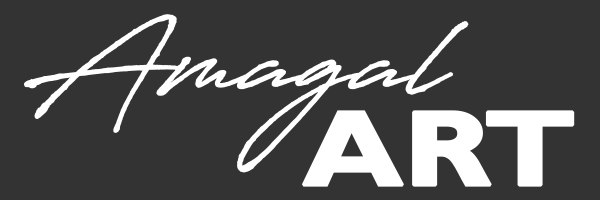
<style>
.page{position:relative;width:600px;height:200px;background:#333333}
.page>*{position:absolute;margin:0}
.t1{font:106.9px "AntroVectra";letter-spacing:-0.02em;color:#ffffff;font-weight:bold;scale:1.2 1}
.t2{font:106.9px "GillSansMT-Bold";letter-spacing:-0.02em;color:#ffffff;text-transform:uppercase;font-weight:bold;scale:1.2 1}
</style>
<div class="page">
<p class="t1" style="left:24px;top:14px;width:445px;height:159px">Amagal</p>
<p class="t2" style="left:301px;top:110px;width:274px;height:77px">Art</p>
</div>
